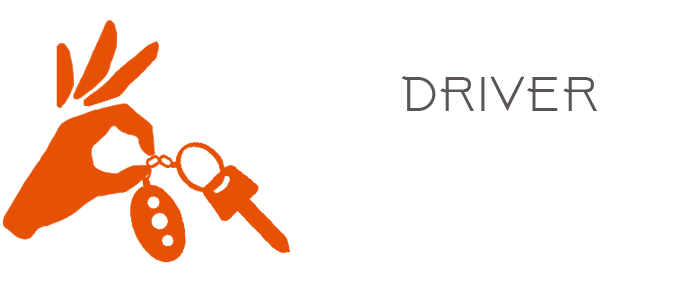
<style>
.page{position:relative;width:700px;height:300px;background:#ffffff}
.page>*{position:absolute;margin:0}
.t1{font:52px "AboveDEMO-Regular";color:#5a5452}
</style>
<div class="page">
<p class="t1" style="left:401px;top:76px;width:196px;height:35px">DRIVER</p>
</div>
